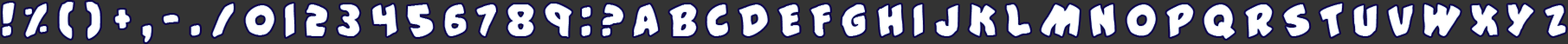
<style>
.page{position:relative;width:1568px;height:44px;background:#333333}
.page>*{position:absolute;margin:0}
.t1{font:45px "#44Font";letter-spacing:0.2em;color:#ffffff}
</style>
<div class="page">
<p class="t1" style="left:2px;top:2px;width:1564px;height:40px">!%()+,-./0123456789:?ABCDEFGHIJKLMNOPQRSTUVWXYZ</p>
</div>
